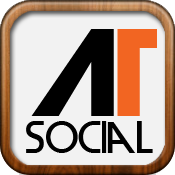
<style>
.page{position:relative;width:175px;height:175px;background:#f2f2f2}
.page>*{position:absolute;margin:0}
.t1{font:115.6px "DevilBreezeBold";color:#000000}
.t2{font:115.6px "DevilBreezeBold";color:#f26522}
.t3{font:41.6px "DevilBreezeMedium";color:#000000}
.t4{font:33.2px "DevilBreezeBold";color:#f26522}
</style>
<div class="page">
<p class="t1" style="left:31px;top:29px;width:126px;height:87px">A<span class="t2">T</span></p>
<p class="t3" style="left:26px;top:121px;width:127px;height:32px"><span class="t4"> </span>social</p>
</div>
